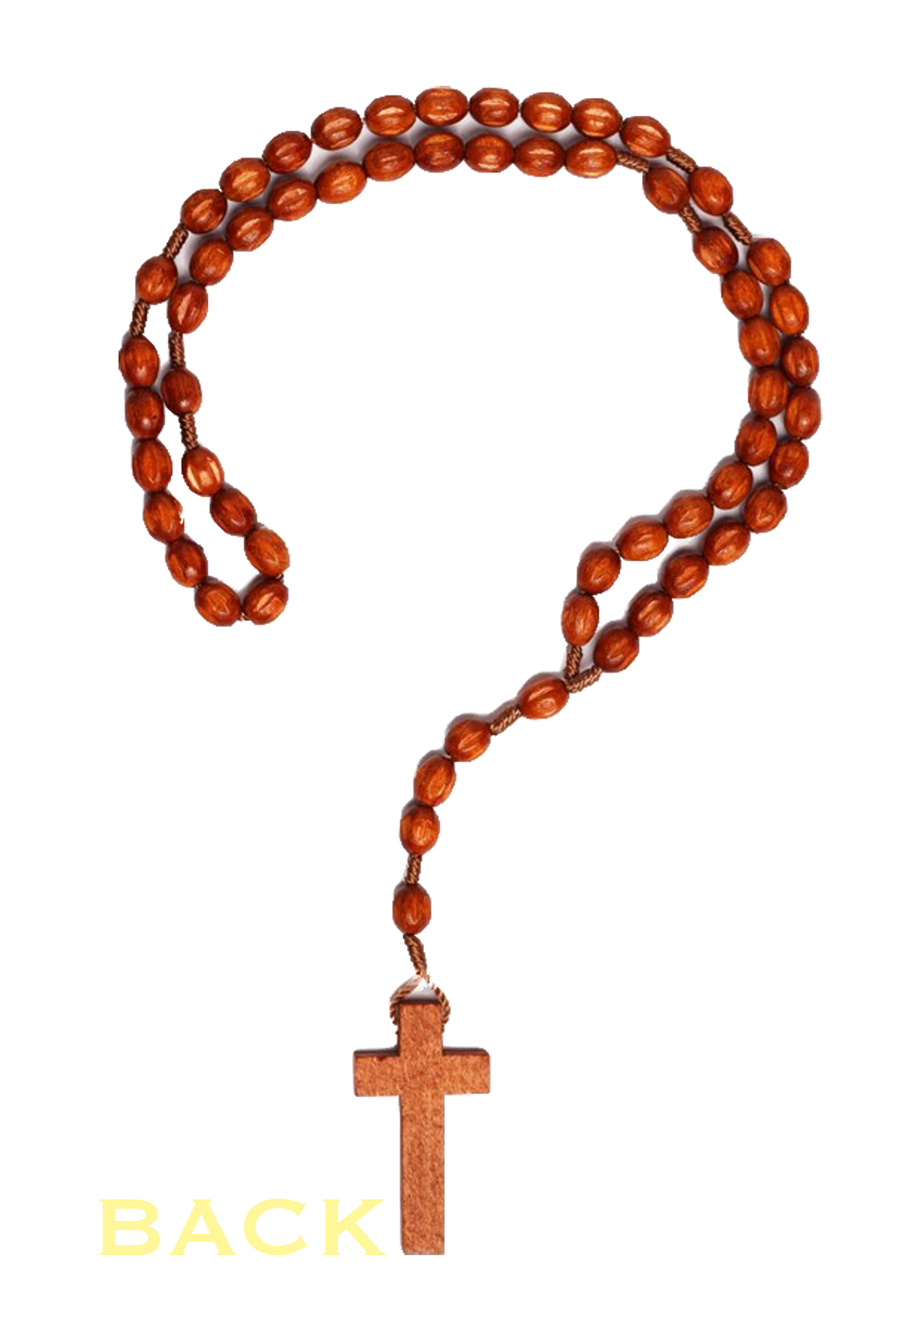
<style>
.page{position:relative;width:901px;height:1323px;background:#ffffff}
.page>*{position:absolute;margin:0}
.t1{font:106.7px "Copperplate";color:#fff799}
</style>
<div class="page">
<p class="t1" style="left:100px;top:1199px;width:285px;height:56px">BACK</p>
</div>
